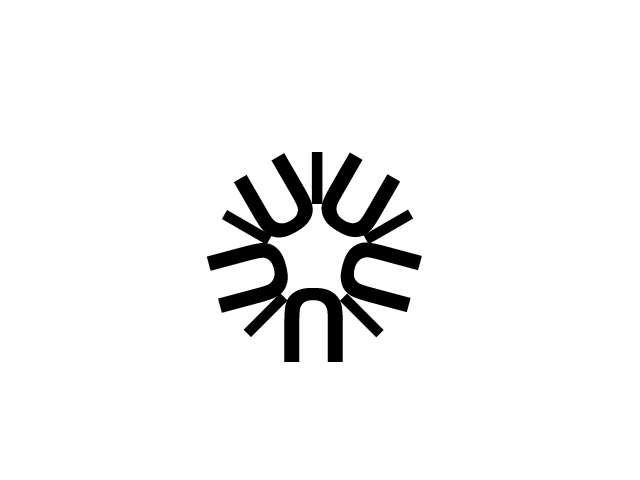
<style>
.page{position:relative;width:640px;height:480px;background:#ffffff}
.page>*{position:absolute;margin:0}
.t1{font:102px "Arial-BoldMT";color:#000000}
.t2{font:72px "Arial-BoldMT";color:#000000}
</style>
<div class="page">
<p class="t1" style="left:233px;top:153px;width:80px;height:85px;rotate:-30deg">U</p>
<p class="t2" style="left:311px;top:152px;width:12px;height:52px">I</p>
<p class="t1" style="left:321px;top:152px;width:80px;height:85px;rotate:30deg">U</p>
<p class="t2" style="left:363px;top:209px;width:51px;height:36px;rotate:60deg">I</p>
<p class="t2" style="left:222px;top:210px;width:50px;height:35px;rotate:-60deg">I</p>
<p class="t1" style="left:206px;top:243px;width:82px;height:70px;rotate:-105deg">U</p>
<p class="t1" style="left:340px;top:242px;width:82px;height:71px;rotate:105deg">U</p>
<p class="t2" style="left:243px;top:293px;width:45px;height:44px;rotate:-135deg">I</p>
<p class="t1" style="left:284px;top:288px;width:59px;height:74px;rotate:180deg">U</p>
<p class="t2" style="left:339px;top:293px;width:45px;height:45px;rotate:135deg">I</p>
</div>
